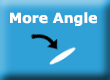
<style>
.page{position:relative;width:110px;height:80px;background:#2fa1d7}
.page>*{position:absolute;margin:0}
.t1{font:14px "Verdana-Bold";color:#ffffff}
</style>
<div class="page">
<p class="t1" style="left:10px;top:12px;width:87px;height:14px">More Angle</p>
</div>
